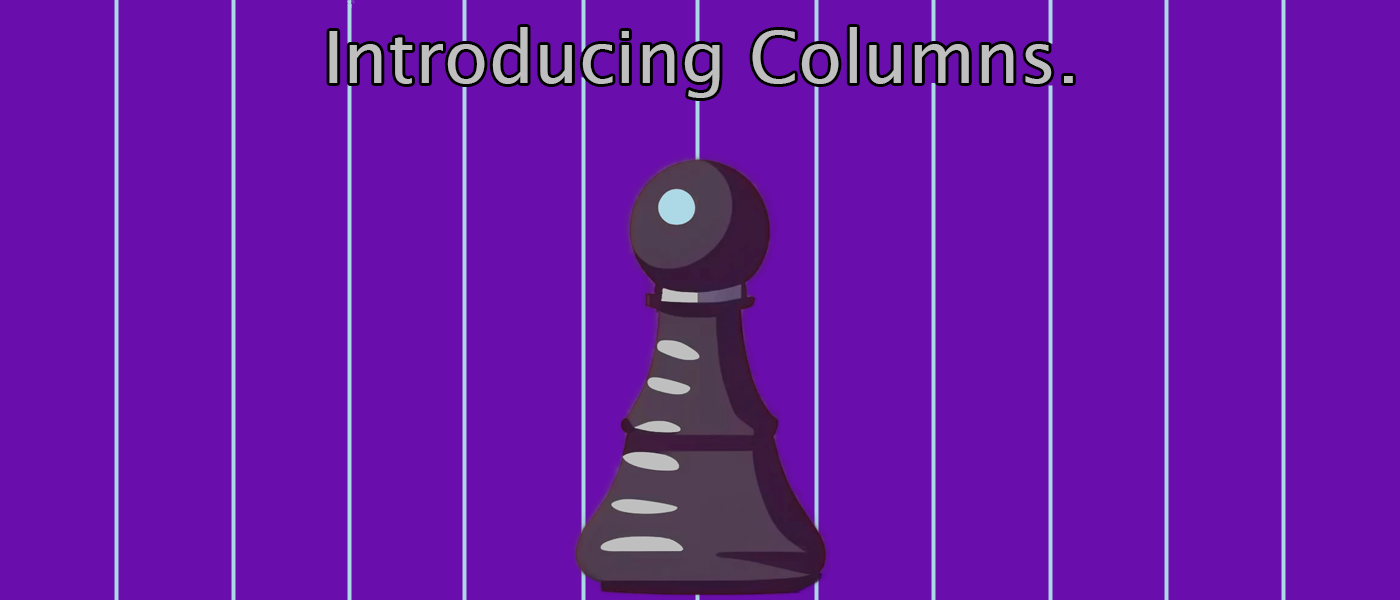
<style>
.page{position:relative;width:1400px;height:600px;background:#6a0dad}
.page>*{position:absolute;margin:0}
.t1{font:72px "LucidaSans";color:#bfbfbf}
</style>
<div class="page">
<p class="t1" style="left:329px;top:27px;width:744px;height:71px">Introducing Columns.</p>
</div>
